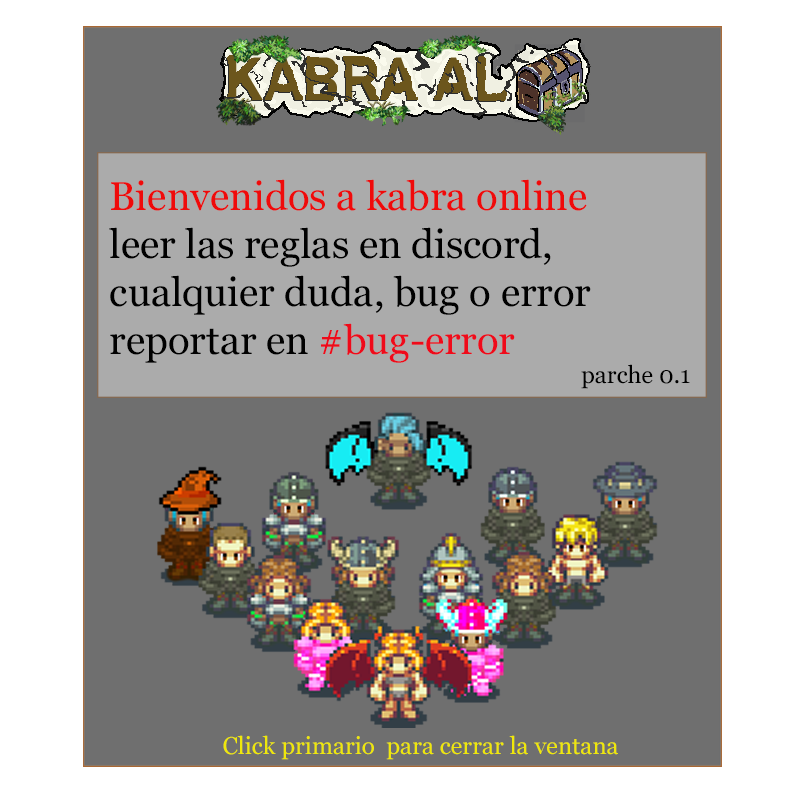
<style>
.page{position:relative;width:800px;height:800px;background:#6f6f6f}
.page>*{position:absolute;margin:0}
.t1{font:40px "Georgia";color:#000000}
.t2{font:40px "Georgia";color:#ef0a0a}
.t3{font:40px "Georgia";color:#ef0a1a}
.t4{font:24px "Georgia";color:#000000}
.t5{font:24px "Georgia";color:#efe70a}
</style>
<div class="page">
<p class="t1" style="left:109px;top:179px;width:482px;height:184px"><span class="t2">Bienvenidos a kabra online<br></span>leer las reglas en discord,<br>cualquier duda, bug o error reportar en <span class="t3">#bug-error</span></p>
<p class="t4" style="left:581px;top:364px;width:109px;height:25px">parche 0.1</p>
<p class="t5" style="left:223px;top:735px;width:395px;height:25px">Click primario  para cerrar la ventana</p>
</div>
